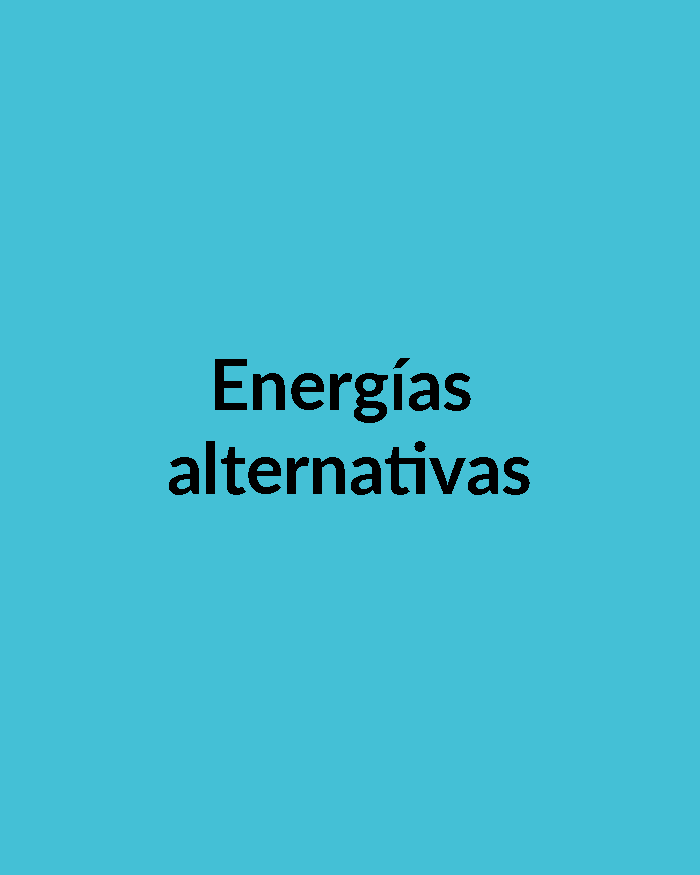
<style>
.page{position:relative;width:700px;height:875px;background:#44c0d6}
.page>*{position:absolute;margin:0}
.t1{font:69.9px "Lato-Bold";color:#000000}
</style>
<div class="page">
<p class="t1" style="left:169px;top:358px;width:361px;height:137px;text-align:center">Energías <br>alternativas</p>
</div>
